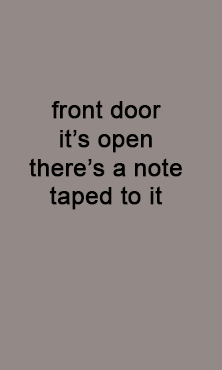
<style>
.page{position:relative;width:222px;height:370px;background:#938a87}
.page>*{position:absolute;margin:0}
.t1{font:24px "ArialMT";color:#000000;font-weight:bold}
</style>
<div class="page">
<p class="t1" style="left:29px;top:100px;width:153px;height:110px;text-align:center">front door<br>it’s open<br>there’s a note<br>taped to it</p>
</div>
